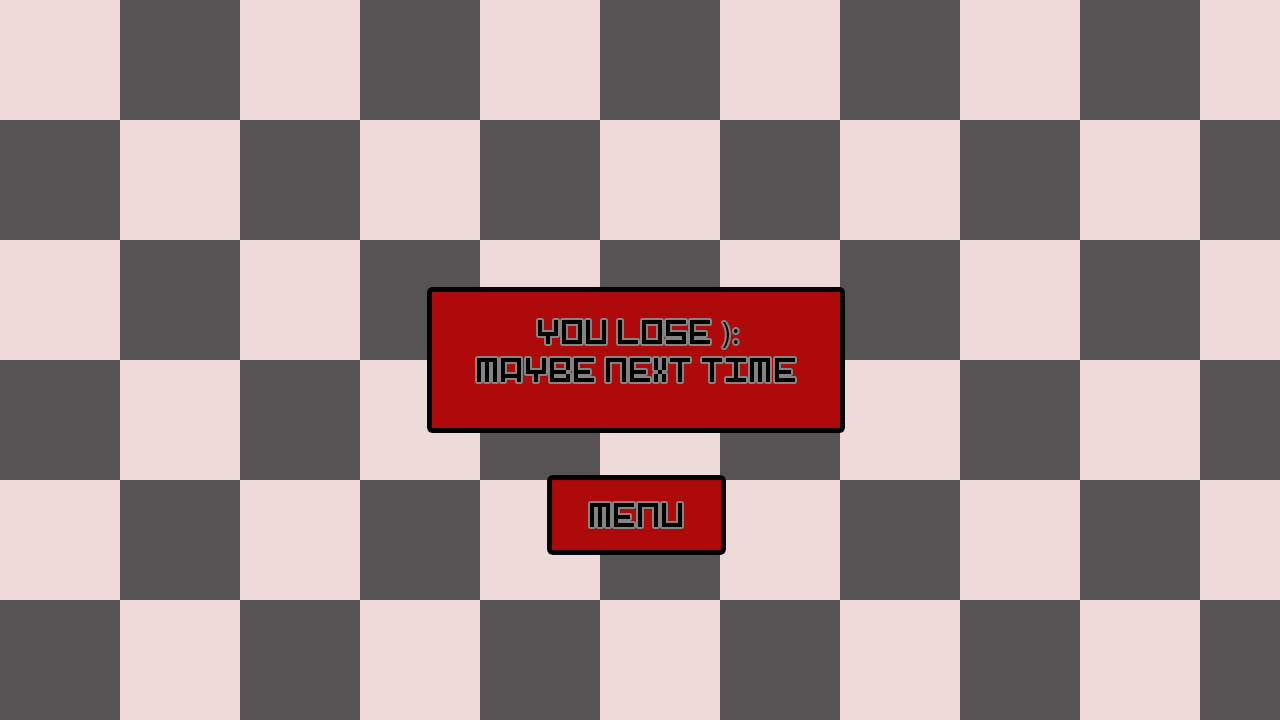
<style>
.page{position:relative;width:1280px;height:720px;background:#efdada}
.page>*{position:absolute;margin:0}
.t1{font:32px "MyFontRegular";color:#000000}
.t2{font:32px "MyriadPro-Regular";color:#000000}
.t3{font:32px "Pixel-Art";color:#000000}
</style>
<div class="page">
<p class="t1" style="left:477px;top:320px;width:318px;height:62px;text-align:center"><span class="t2">:(</span> YOU LOSE<br>MAYBE NEXT TIME</p>
<p class="t3" style="left:590px;top:503px;width:92px;height:24px">MENU</p>
</div>
